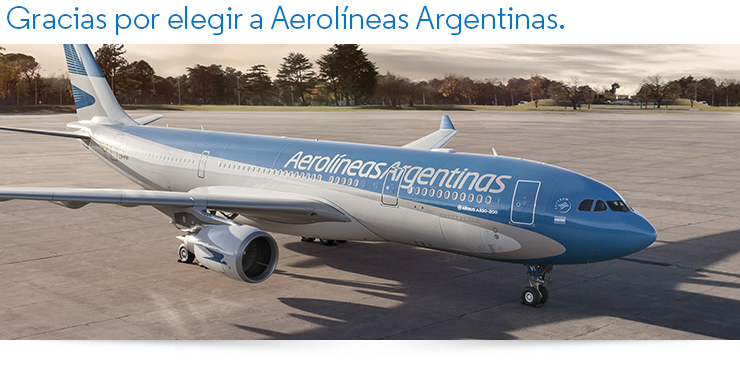
<style>
.page{position:relative;width:740px;height:370px}
.page>*{position:absolute;margin:0}
.t1{font:33px "Regular-Regular";color:#0077c8}
</style>
<div class="page">
<p class="t1" style="left:7px;top:6px;width:557px;height:29px">Gracias por elegir a Aerolíneas Argentinas.</p>
</div>
